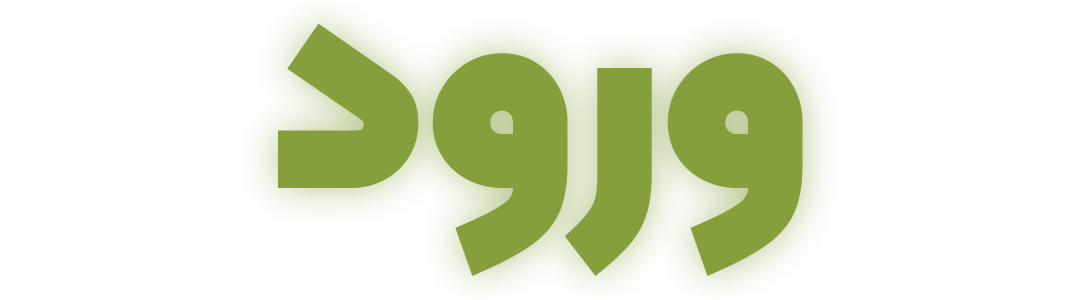
<style>
.page{position:relative;width:1080px;height:300px;background:#ffffff}
.page>*{position:absolute;margin:0}
.t1{font:294.9px "Kalameh-Black";color:#859f3d}
</style>
<div class="page">
<p class="t1" style="left:278px;top:23px;width:525px;height:253px">ورود</p>
</div>
